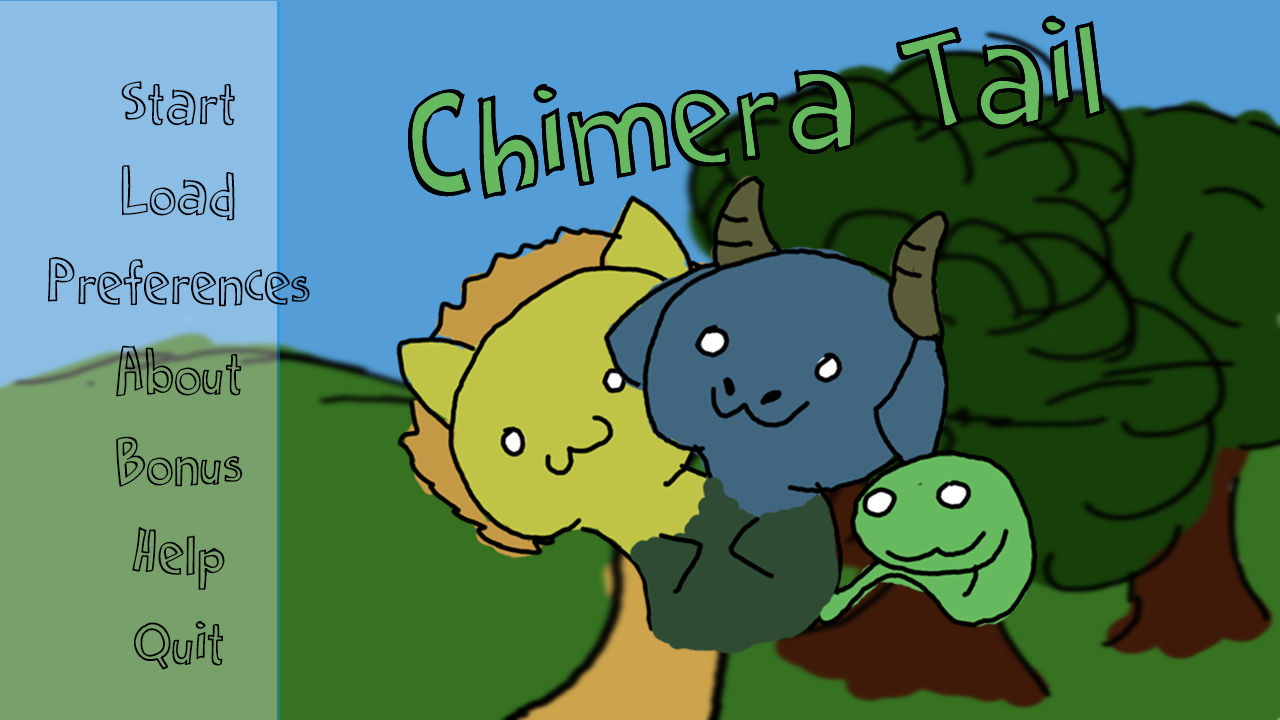
<style>
.page{position:relative;width:1280px;height:720px}
.page>*{position:absolute;margin:0}
.t1{font:72px/60px "Cartoon2Package";color:#000000}
</style>
<div class="page">
<p class="t1" style="left:48px;top:81px;width:262px;height:589px;text-align:center">Start<br>Load<br>Preferences<br>About<br>Bonus<br>Help<br>Quit</p>
</div>
